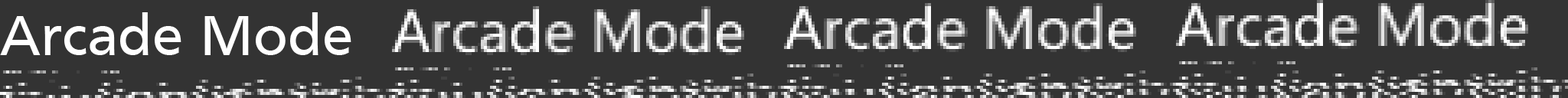
<style>
.page{position:relative;width:1568px;height:98px;background:#333333}
.page>*{position:absolute;margin:0}
.t1{font:59.2px "Frutiger";color:#ffffff}
</style>
<div class="page">
<p class="t1" style="left:0px;top:12px;width:351px;height:43px">Arcade Mode</p>
</div>
